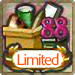
<style>
.page{position:relative;width:75px;height:75px}
.page>*{position:absolute;margin:0}
.t1{font:16px "AdobeClean-Regular";letter-spacing:-0.08em;color:#ff5a00}
</style>
<div class="page">
<p class="t1" style="left:17px;top:53px;width:42px;height:13px">Limited</p>
</div>
